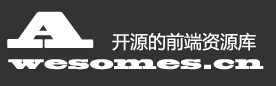
<style>
.page{position:relative;width:276px;height:86px;background:#333333}
.page>*{position:absolute;margin:0}
.t1{font:48px "BlackoakStd";color:#ffffff}
.t2{font:18px "MicrosoftYaHei";color:#ffffff}
.t3{font:18px "BlackoakStd";color:#fffefe}
</style>
<div class="page">
<p class="t1" style="left:7px;top:11px;width:87px;height:37px">A</p>
<p class="t2" style="left:112px;top:32px;width:144px;height:19px">开源的前端资源库</p>
<p class="t3" style="left:8px;top:59px;width:256px;height:11px">wesomes.cn</p>
</div>
